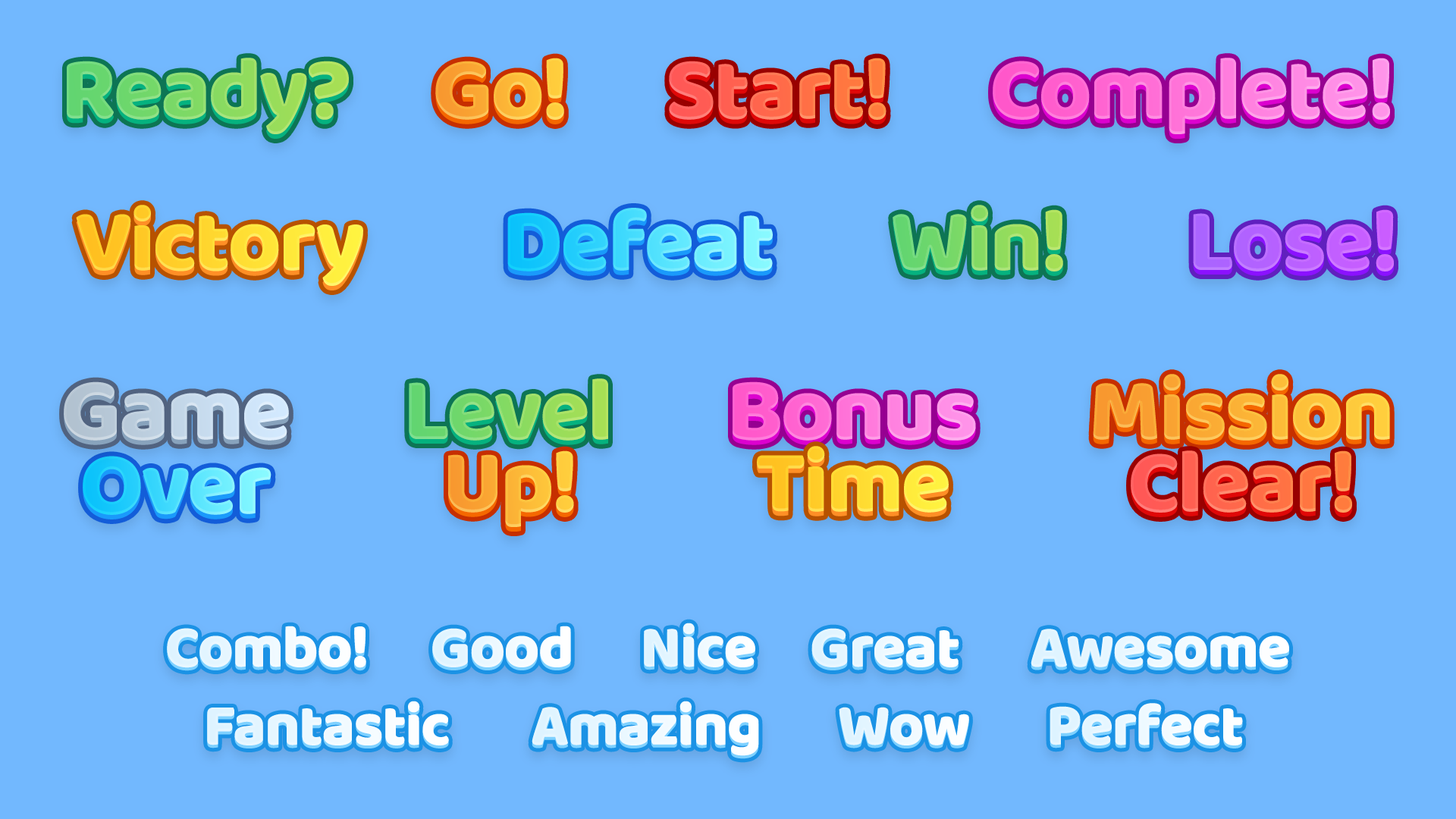
<style>
.page{position:relative;width:1456px;height:819px;background:#72b8fe}
.page>*{position:absolute;margin:0}
.t1{font:91px "BalooBhaijaan-Regular";letter-spacing:-0.025em}
.t2{font:91px "BalooBhaijaan-Regular";letter-spacing:-0.025em;color:#be63ff}
.t3{font:91px "BalooBhaijaan-Regular";letter-spacing:-0.025em;color:#c6d7e8}
.t4{font:60.7px "BalooBhaijaan-Regular";letter-spacing:-0.025em;color:#ecf8ff}
.t5{font:60.7px "BalooBhaijaan-Regular";letter-spacing:-0.025em;color:#f0faff}
.t6{font:60.7px "BalooBhaijaan-Regular";letter-spacing:-0.025em;color:#ebf8ff}
.t7{font:60.7px "BalooBhaijaan-Regular";letter-spacing:-0.025em;color:#e9f7ff}
.t8{font:60.7px "BalooBhaijaan-Regular";letter-spacing:-0.025em;color:#eef9ff}
.t9{font:60.7px "BalooBhaijaan-Regular";letter-spacing:-0.025em;color:#effaff}
.t10{font:60.7px "BalooBhaijaan-Regular";letter-spacing:-0.025em;color:#eaf7ff}
.t11{font:60.7px "BalooBhaijaan-Regular";letter-spacing:-0.025em;color:#f1faff}
.t12{font:60.7px "BalooBhaijaan-Regular";letter-spacing:-0.025em;color:#eaf8ff}
.t13{font:60.7px "BalooBhaijaan-Regular";letter-spacing:-0.025em;color:#eff9ff}
</style>
<div class="page">
<p class="t1" style="left:67px;top:62px;width:282px;height:77px">Ready?</p>
<p class="t1" style="left:67px;top:58px;width:282px;height:76px">Ready?</p>
<p class="t1" style="left:435px;top:62px;width:129px;height:62px">Go!</p>
<p class="t1" style="left:435px;top:58px;width:129px;height:62px">Go!</p>
<p class="t1" style="left:669px;top:62px;width:217px;height:62px">Start!</p>
<p class="t1" style="left:669px;top:58px;width:217px;height:62px">Start!</p>
<p class="t1" style="left:993px;top:62px;width:397px;height:77px">Complete!</p>
<p class="t1" style="left:993px;top:58px;width:397px;height:76px">Complete!</p>
<p class="t1" style="left:76px;top:209px;width:287px;height:81px">Victory</p>
<p class="t1" style="left:76px;top:205px;width:287px;height:81px">Victory</p>
<p class="t1" style="left:507px;top:208px;width:266px;height:63px">Defeat</p>
<p class="t1" style="left:893px;top:209px;width:170px;height:67px">Win!</p>
<p class="t1" style="left:893px;top:205px;width:170px;height:66px">Win!</p>
<p class="t2" style="left:1193px;top:209px;width:201px;height:62px">Lose!</p>
<p class="t1" style="left:507px;top:212px;width:266px;height:64px">Defeat</p>
<p class="t1" style="left:1193px;top:214px;width:201px;height:62px">Lose!</p>
<p class="t1" style="left:1093px;top:374px;width:297px;height:67px">Mission</p>
<p class="t1" style="left:64px;top:386px;width:225px;height:59px">Game</p>
<p class="t3" style="left:64px;top:381px;width:225px;height:60px">Game</p>
<p class="t1" style="left:409px;top:383px;width:199px;height:62px">Level</p>
<p class="t1" style="left:409px;top:378px;width:199px;height:63px">Level</p>
<p class="t1" style="left:733px;top:386px;width:243px;height:59px">Bonus</p>
<p class="t1" style="left:733px;top:381px;width:243px;height:60px">Bonus</p>
<p class="t1" style="left:1093px;top:378px;width:297px;height:67px">Mission</p>
<p class="t1" style="left:757px;top:446px;width:192px;height:67px">Time</p>
<p class="t1" style="left:83px;top:460px;width:188px;height:59px">Over</p>
<p class="t1" style="left:83px;top:456px;width:188px;height:59px">Over</p>
<p class="t1" style="left:448px;top:455px;width:126px;height:77px">Up!</p>
<p class="t1" style="left:448px;top:450px;width:126px;height:77px">Up!</p>
<p class="t1" style="left:757px;top:450px;width:192px;height:67px">Time</p>
<p class="t1" style="left:1131px;top:455px;width:221px;height:62px">Clear!</p>
<p class="t1" style="left:1131px;top:450px;width:221px;height:63px">Clear!</p>
<p class="t4" style="left:167px;top:629px;width:199px;height:42px">Combo!</p>
<p class="t5" style="left:167px;top:626px;width:199px;height:42px">Combo!</p>
<p class="t6" style="left:432px;top:629px;width:139px;height:41px">Good</p>
<p class="t5" style="left:432px;top:626px;width:139px;height:41px">Good</p>
<p class="t7" style="left:644px;top:626px;width:111px;height:44px">Nice</p>
<p class="t8" style="left:644px;top:623px;width:111px;height:44px">Nice</p>
<p class="t5" style="left:811px;top:628px;width:148px;height:39px">Great</p>
<p class="t9" style="left:1031px;top:629px;width:258px;height:38px">Awesome</p>
<p class="t7" style="left:811px;top:631px;width:148px;height:39px">Great</p>
<p class="t10" style="left:1031px;top:632px;width:258px;height:38px">Awesome</p>
<p class="t5" style="left:207px;top:701px;width:242px;height:44px">Fantastic</p>
<p class="t11" style="left:532px;top:701px;width:227px;height:55px">Amazing</p>
<p class="t12" style="left:207px;top:704px;width:242px;height:44px">Fantastic</p>
<p class="t6" style="left:532px;top:704px;width:227px;height:55px">Amazing</p>
<p class="t6" style="left:839px;top:710px;width:130px;height:38px">Wow</p>
<p class="t8" style="left:839px;top:707px;width:130px;height:38px">Wow</p>
<p class="t7" style="left:1050px;top:706px;width:193px;height:42px">Perfect</p>
<p class="t13" style="left:1050px;top:703px;width:193px;height:42px">Perfect</p>
</div>
